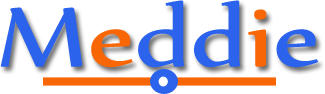
<style>
.page{position:relative;width:325px;height:94px;background:#ffffff}
.page>*{position:absolute;margin:0}
.t1{font:99.6px "Nyala-Regular";color:#2c63ec;scale:1.2 1}
.t2{font:99.6px "Nyala-Regular";color:#f86605;scale:1.2 1}
</style>
<div class="page">
<p class="t1" style="left:0px;top:0px;width:318px;height:68px">M<span class="t2">e</span>dd<span class="t2">i</span>e</p>
</div>
